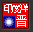
<style>
.page{position:relative;width:33px;height:32px;background:#f20000}
.page>*{position:absolute;margin:0}
.t1{font:10.4px "SimSun";letter-spacing:-0.25em;color:#ffffff}
.t2{font:11.7px "SimSun";color:#ffffff}
</style>
<div class="page">
<p class="t1" style="left:4px;top:4px;width:24px;height:9px">印度洋</p>
<p class="t2" style="left:16px;top:15px;width:11px;height:12px">晋</p>
</div>
